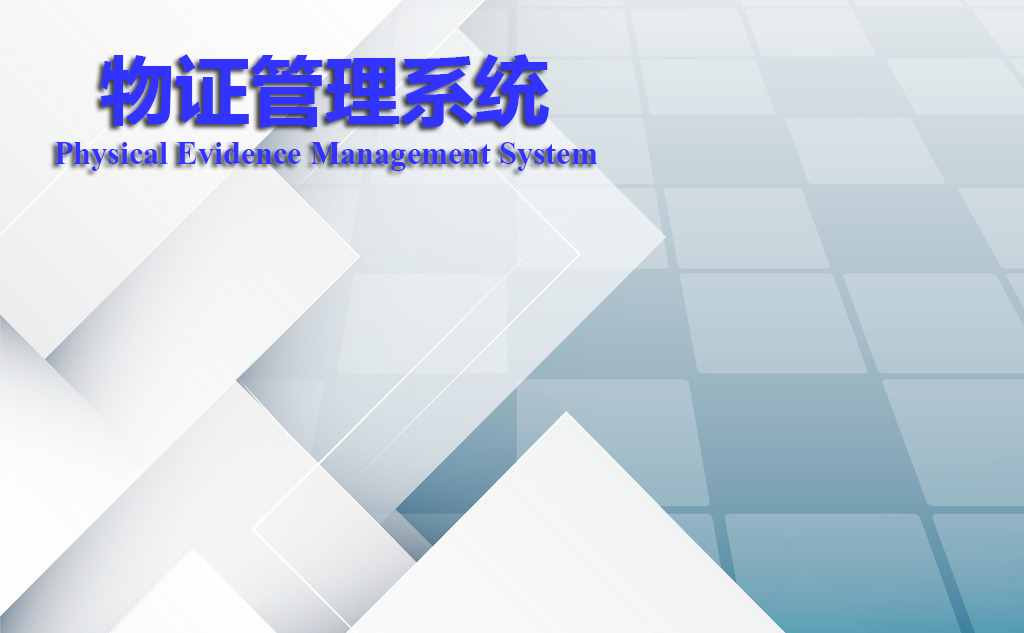
<style>
.page{position:relative;width:1024px;height:633px}
.page>*{position:absolute;margin:0}
.t1{font:75px "MicrosoftYaHei-Bold";color:#3333ff}
.t2{font:41.7px "Kokila-Bold";color:#3333ff}
</style>
<div class="page">
<p class="t1" style="left:101px;top:54px;width:448px;height:73px">物证管理系统</p>
<p class="t2" style="left:54px;top:142px;width:544px;height:29px">Physical Evidence Management System</p>
</div>
